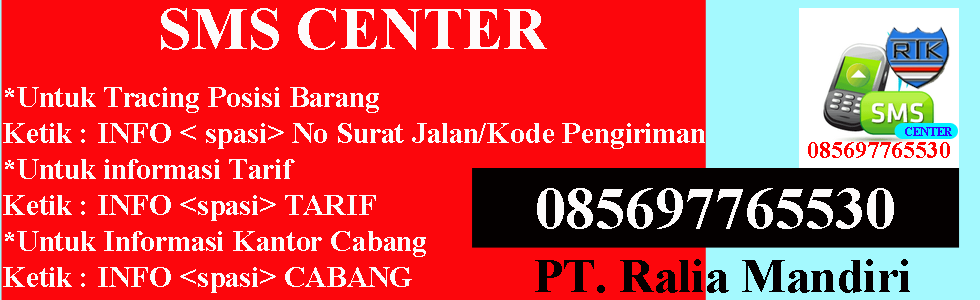
<style>
.page{position:relative;width:980px;height:300px;background:#fc060c}
.page>*{position:absolute;margin:0}
.t1{font:60px "TimesNewRomanPS-BoldMT";color:#fdfbfb}
.t2{font:30px "TimesNewRomanPS-BoldMT";color:#fdfbfb}
.t3{font:48px "TimesNewRomanPS-BoldMT";color:#040000}
</style>
<div class="page">
<p class="t1" style="left:161px;top:8px;width:386px;height:42px">SMS CENTER</p>
<p class="t2" style="left:3px;top:87px;width:702px;height:206px">*Untuk Tracing Posisi Barang<br>Ketik : INFO &lt; spasi&gt; No Surat Jalan/Kode Pengiriman<br>*Untuk informasi Tarif<br>Ketik : INFO &lt;spasi&gt; TARIF<br>*Untuk Informasi Kantor Cabang<br>Ketik : INFO &lt;spasi&gt; CABANG</p>
<p class="t1" style="left:537px;top:188px;width:357px;height:41px">085697765530</p>
<p class="t3" style="left:535px;top:259px;width:375px;height:34px">PT. Ralia Mandiri</p>
</div>
